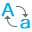
<style>
.page{position:relative;width:32px;height:32px;background:#ffffff}
.page>*{position:absolute;margin:0}
.t1{font:18px "YuGothic-Regular";color:#00abec;font-weight:bold;scale:1.2 1}
</style>
<div class="page">
<p class="t1" style="left:1px;top:3px;width:14px;height:14px">A</p>
<p class="t1" style="left:20px;top:19px;width:10px;height:10px">a</p>
</div>
